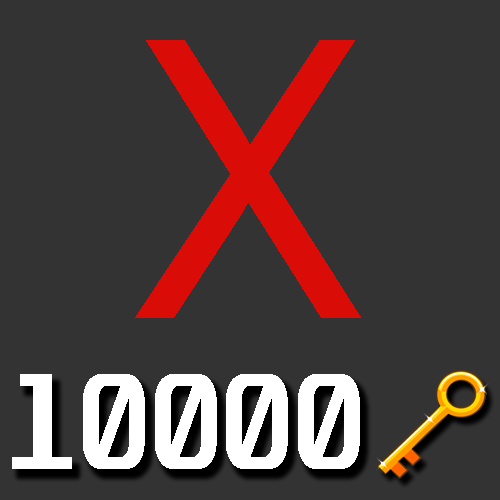
<style>
.page{position:relative;width:500px;height:500px;background:#333333}
.page>*{position:absolute;margin:0}
.t1{font:388px "ArialMT";color:#d90c08;scale:0.89 1}
.t2{font:117.4px "Unispace-Bold";color:#ffffff}
</style>
<div class="page">
<p class="t1" style="left:135px;top:40px;width:226px;height:278px">X</p>
<p class="t2" style="left:12px;top:374px;width:348px;height:95px">10000</p>
</div>
